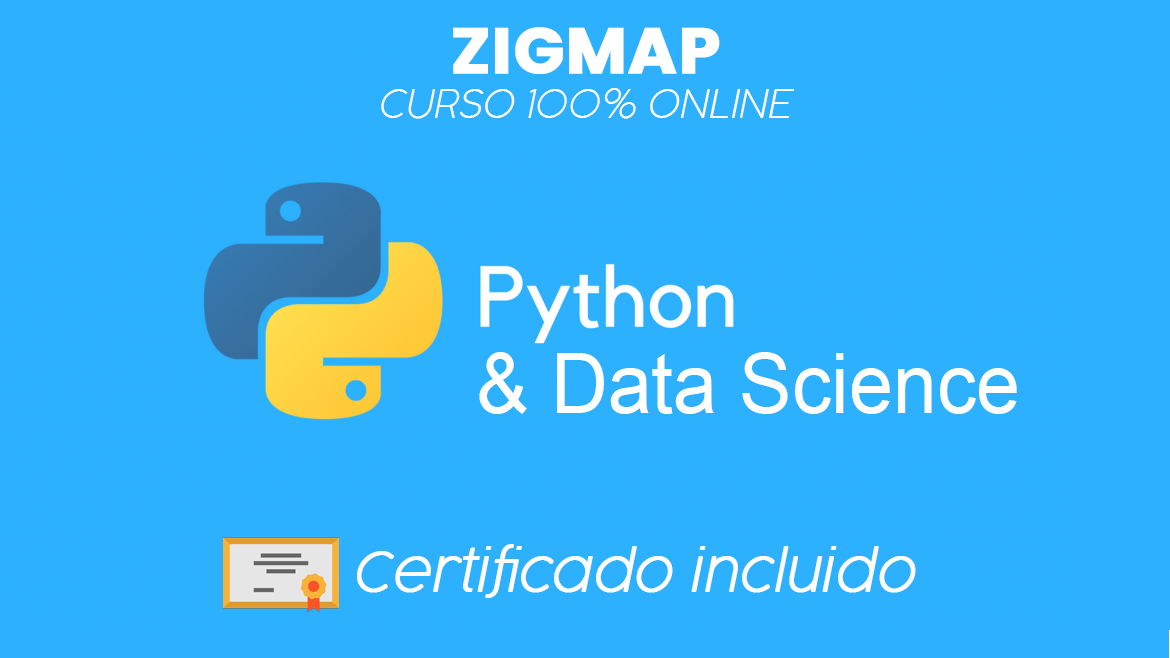
<style>
.page{position:relative;width:1170px;height:658px;background:#2db1ff}
.page>*{position:absolute;margin:0}
.t1{font:64.4px "Poppins-Bold";color:#ffffff;font-weight:bold}
.t2{font:37.8px "CocogoosePro-UltraLightItalic";color:#ffffff}
.t3{font:82.8px "ArialMT";color:#ffffff;scale:0.95 1}
.t4{font:53.5px "CocogoosePro-UltraLightItalic";color:#ffffff;font-weight:bold;scale:0.96 1}
</style>
<div class="page">
<p class="t1" style="left:453px;top:27px;width:267px;height:47px">ZIGMAP</p>
<p class="t2" style="left:381px;top:88px;width:414px;height:31px">CURSO 100% ONLINE</p>
<p class="t3" style="left:479px;top:352px;width:538px;height:62px">&amp; Data Science</p>
<p class="t4" style="left:357px;top:544px;width:559px;height:54px">Certificado incluido</p>
</div>
